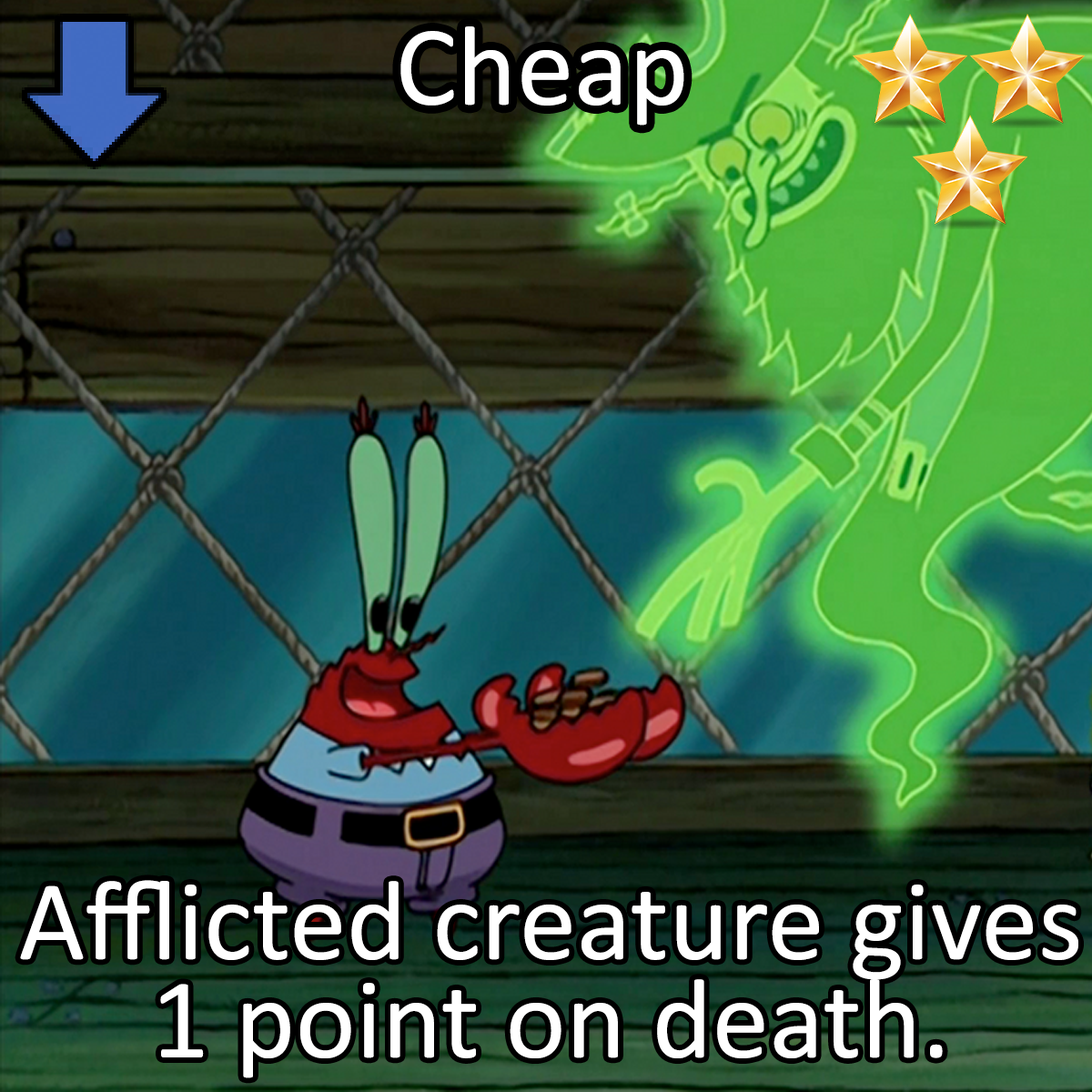
<style>
.page{position:relative;width:1092px;height:1092px}
.page>*{position:absolute;margin:0}
.t1{font:196.6px "Calibri";color:#ffffff}
</style>
<div class="page">
<p class="t1" style="left:400px;top:26px;width:284px;height:100px">Cheap</p>
<p class="t1" style="left:20px;top:880px;width:1058px;height:198px">Afflicted creature gives 1 point on death.</p>
</div>
